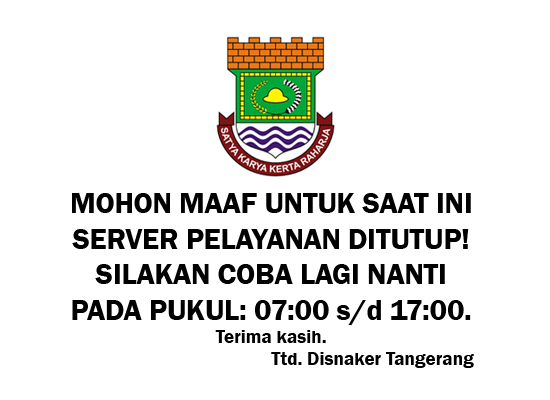
<style>
.page{position:relative;width:550px;height:400px;background:#ffffff}
.page>*{position:absolute;margin:0}
.t1{font:29.6px "FranklinGothic-Demi";color:#000000}
.t2{font:19.1px "FranklinGothic-Demi";color:#000000}
</style>
<div class="page">
<p class="t1" style="left:72px;top:193px;width:402px;height:175px;text-align:center">MOHON MAAF UNTUK SAAT INI<br>SERVER PELAYANAN DITUTUP!<br>SILAKAN COBA LAGI NANTI<br>PADA PUKUL: 07:00 s/d 17:00.<br><span class="t2">Terima kasih.<br>Ttd. Disnaker Tangerang</span></p>
</div>
